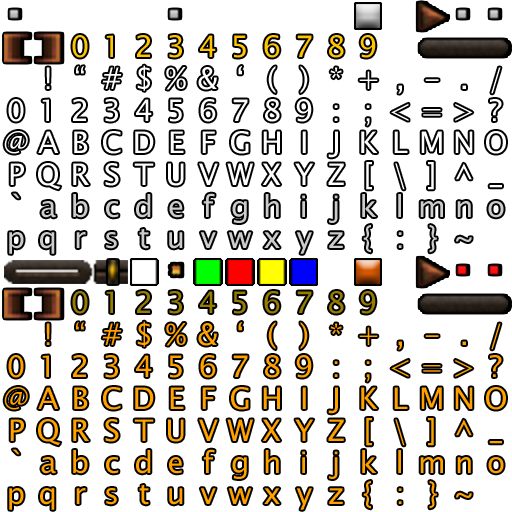
<style>
.page{position:relative;width:512px;height:512px;background:#ffffff}
.page>*{position:absolute;margin:0}
.t1{font:29.6px "LucidaSansUnicode";letter-spacing:0.35em;color:#ffc600}
.t2{font:29.6px "LucidaSansUnicode";letter-spacing:0.35em;color:#ffffff}
.t3{font:29.6px "LucidaSansUnicode";letter-spacing:0.35em;color:#cccccc}
.t4{font:29.6px "LucidaSansUnicode";letter-spacing:0.35em;color:#967c00}
.t5{font:29.6px "LucidaSansUnicode";letter-spacing:0.35em;color:#ffa200}
</style>
<div class="page">
<p class="t1" style="left:72px;top:35px;width:16px;height:23px">0</p>
<p class="t1" style="left:106px;top:35px;width:7px;height:22px">1</p>
<p class="t1" style="left:137px;top:35px;width:13px;height:22px">2</p>
<p class="t1" style="left:169px;top:35px;width:13px;height:23px">3</p>
<p class="t1" style="left:200px;top:35px;width:16px;height:22px">4</p>
<p class="t1" style="left:234px;top:35px;width:12px;height:23px">5</p>
<p class="t1" style="left:264px;top:35px;width:16px;height:23px">6</p>
<p class="t1" style="left:297px;top:35px;width:15px;height:22px">7</p>
<p class="t1" style="left:329px;top:35px;width:15px;height:23px">8</p>
<p class="t1" style="left:360px;top:35px;width:16px;height:23px">9</p>
<p class="t2" style="left:137px;top:65px;width:13px;height:26px">$</p>
<p class="t2" style="left:46px;top:67px;width:4px;height:22px">!</p>
<p class="t2" style="left:76px;top:66px;width:8px;height:8px">“</p>
<p class="t2" style="left:102px;top:67px;width:20px;height:22px">#</p>
<p class="t2" style="left:166px;top:67px;width:20px;height:23px">%</p>
<p class="t2" style="left:198px;top:67px;width:19px;height:23px">&amp;</p>
<p class="t2" style="left:238px;top:66px;width:4px;height:9px">‘</p>
<p class="t2" style="left:268px;top:66px;width:8px;height:28px">(</p>
<p class="t2" style="left:300px;top:66px;width:8px;height:28px">)</p>
<p class="t2" style="left:330px;top:67px;width:12px;height:12px">*</p>
<p class="t2" style="left:398px;top:85px;width:4px;height:9px">,</p>
<p class="t2" style="left:425px;top:79px;width:14px;height:2px">-</p>
<p class="t2" style="left:462px;top:85px;width:4px;height:4px">.</p>
<p class="t2" style="left:8px;top:99px;width:16px;height:23px">0</p>
<p class="t2" style="left:42px;top:99px;width:7px;height:22px">1</p>
<p class="t2" style="left:73px;top:99px;width:13px;height:22px">2</p>
<p class="t2" style="left:105px;top:99px;width:13px;height:23px">3</p>
<p class="t2" style="left:136px;top:99px;width:16px;height:22px">4</p>
<p class="t2" style="left:170px;top:99px;width:12px;height:23px">5</p>
<p class="t2" style="left:200px;top:99px;width:16px;height:23px">6</p>
<p class="t2" style="left:265px;top:99px;width:15px;height:23px">8</p>
<p class="t2" style="left:296px;top:99px;width:16px;height:23px">9</p>
<p class="t2" style="left:490px;top:99px;width:12px;height:22px">?</p>
<p class="t2" style="left:423px;top:109px;width:18px;height:7px">=</p>
<p class="t2" style="left:4px;top:131px;width:24px;height:23px">@</p>
<p class="t2" style="left:38px;top:131px;width:21px;height:22px">A</p>
<p class="t2" style="left:74px;top:131px;width:14px;height:22px">B</p>
<p class="t2" style="left:135px;top:131px;width:19px;height:22px">D</p>
<p class="t2" style="left:170px;top:131px;width:14px;height:22px">E</p>
<p class="t2" style="left:202px;top:131px;width:13px;height:22px">F</p>
<p class="t2" style="left:231px;top:131px;width:18px;height:23px">G</p>
<p class="t2" style="left:263px;top:131px;width:17px;height:22px">H</p>
<p class="t2" style="left:302px;top:131px;width:4px;height:22px">I</p>
<p class="t2" style="left:328px;top:131px;width:10px;height:27px">J</p>
<p class="t2" style="left:361px;top:131px;width:17px;height:22px">K</p>
<p class="t2" style="left:421px;top:131px;width:21px;height:22px">M</p>
<p class="t2" style="left:455px;top:131px;width:18px;height:22px">N</p>
<p class="t2" style="left:486px;top:131px;width:20px;height:23px">O</p>
<p class="t2" style="left:10px;top:163px;width:14px;height:22px">P</p>
<p class="t2" style="left:38px;top:163px;width:23px;height:27px">Q</p>
<p class="t2" style="left:73px;top:163px;width:16px;height:22px">R</p>
<p class="t2" style="left:105px;top:163px;width:14px;height:23px">S</p>
<p class="t2" style="left:168px;top:163px;width:16px;height:23px">U</p>
<p class="t2" style="left:199px;top:163px;width:19px;height:22px">V</p>
<p class="t2" style="left:227px;top:163px;width:26px;height:22px">W</p>
<p class="t2" style="left:262px;top:163px;width:19px;height:22px">X</p>
<p class="t2" style="left:328px;top:163px;width:16px;height:22px">Z</p>
<p class="t2" style="left:366px;top:162px;width:6px;height:28px">[</p>
<p class="t2" style="left:428px;top:162px;width:6px;height:28px">]</p>
<p class="t2" style="left:456px;top:163px;width:16px;height:17px">^</p>
<p class="t2" style="left:489px;top:185px;width:13px;height:3px">_</p>
<p class="t3" style="left:12px;top:193px;width:8px;height:6px">`</p>
<p class="t3" style="left:73px;top:194px;width:15px;height:24px">b</p>
<p class="t3" style="left:136px;top:194px;width:15px;height:24px">d</p>
<p class="t3" style="left:302px;top:195px;width:3px;height:22px">i</p>
<p class="t3" style="left:398px;top:194px;width:3px;height:23px">l</p>
<p class="t3" style="left:41px;top:201px;width:15px;height:17px">a</p>
<p class="t3" style="left:169px;top:201px;width:14px;height:17px">e</p>
<p class="t3" style="left:232px;top:201px;width:15px;height:22px">g</p>
<p class="t3" style="left:420px;top:201px;width:23px;height:16px">m</p>
<p class="t3" style="left:457px;top:201px;width:14px;height:16px">n</p>
<p class="t3" style="left:488px;top:201px;width:16px;height:17px">o</p>
<p class="t3" style="left:9px;top:232px;width:15px;height:22px">p</p>
<p class="t3" style="left:40px;top:232px;width:15px;height:22px">q</p>
<p class="t3" style="left:106px;top:232px;width:11px;height:17px">s</p>
<p class="t3" style="left:139px;top:229px;width:10px;height:20px">t</p>
<p class="t3" style="left:169px;top:232px;width:14px;height:17px">u</p>
<p class="t3" style="left:228px;top:232px;width:24px;height:16px">w</p>
<p class="t3" style="left:264px;top:232px;width:16px;height:16px">x</p>
<p class="t3" style="left:329px;top:232px;width:14px;height:16px">z</p>
<p class="t3" style="left:363px;top:225px;width:8px;height:28px">{</p>
<p class="t3" style="left:429px;top:225px;width:8px;height:28px">}</p>
<p class="t3" style="left:456px;top:236px;width:16px;height:6px">~</p>
<p class="t4" style="left:72px;top:291px;width:16px;height:23px">0</p>
<p class="t4" style="left:106px;top:291px;width:7px;height:22px">1</p>
<p class="t4" style="left:137px;top:291px;width:13px;height:22px">2</p>
<p class="t4" style="left:169px;top:291px;width:13px;height:23px">3</p>
<p class="t4" style="left:200px;top:291px;width:16px;height:22px">4</p>
<p class="t4" style="left:234px;top:291px;width:12px;height:23px">5</p>
<p class="t4" style="left:264px;top:291px;width:16px;height:23px">6</p>
<p class="t4" style="left:297px;top:291px;width:15px;height:22px">7</p>
<p class="t4" style="left:329px;top:291px;width:15px;height:23px">8</p>
<p class="t4" style="left:360px;top:291px;width:16px;height:23px">9</p>
<p class="t5" style="left:46px;top:323px;width:4px;height:22px">!</p>
<p class="t5" style="left:76px;top:322px;width:8px;height:8px">“</p>
<p class="t5" style="left:102px;top:323px;width:20px;height:22px">#</p>
<p class="t5" style="left:137px;top:321px;width:13px;height:26px">$</p>
<p class="t5" style="left:166px;top:323px;width:20px;height:23px">%</p>
<p class="t5" style="left:198px;top:323px;width:19px;height:23px">&amp;</p>
<p class="t5" style="left:238px;top:322px;width:4px;height:9px">‘</p>
<p class="t5" style="left:268px;top:322px;width:8px;height:28px">(</p>
<p class="t5" style="left:300px;top:322px;width:8px;height:28px">)</p>
<p class="t5" style="left:330px;top:323px;width:12px;height:12px">*</p>
<p class="t5" style="left:359px;top:327px;width:19px;height:18px">+</p>
<p class="t5" style="left:491px;top:323px;width:10px;height:27px">/</p>
<p class="t5" style="left:398px;top:341px;width:4px;height:9px">,</p>
<p class="t5" style="left:425px;top:335px;width:14px;height:2px">-</p>
<p class="t5" style="left:462px;top:341px;width:4px;height:4px">.</p>
<p class="t5" style="left:8px;top:355px;width:16px;height:23px">0</p>
<p class="t5" style="left:42px;top:355px;width:7px;height:22px">1</p>
<p class="t5" style="left:73px;top:355px;width:13px;height:22px">2</p>
<p class="t5" style="left:105px;top:355px;width:13px;height:23px">3</p>
<p class="t5" style="left:136px;top:355px;width:16px;height:22px">4</p>
<p class="t5" style="left:170px;top:355px;width:12px;height:23px">5</p>
<p class="t5" style="left:200px;top:355px;width:16px;height:23px">6</p>
<p class="t5" style="left:233px;top:355px;width:15px;height:22px">7</p>
<p class="t5" style="left:265px;top:355px;width:15px;height:23px">8</p>
<p class="t5" style="left:296px;top:355px;width:16px;height:23px">9</p>
<p class="t5" style="left:334px;top:361px;width:4px;height:16px">:</p>
<p class="t5" style="left:366px;top:361px;width:4px;height:21px">;</p>
<p class="t5" style="left:391px;top:359px;width:18px;height:18px">&lt;</p>
<p class="t5" style="left:423px;top:365px;width:18px;height:7px">=</p>
<p class="t5" style="left:455px;top:359px;width:18px;height:18px">&gt;</p>
<p class="t5" style="left:490px;top:355px;width:12px;height:22px">?</p>
<p class="t5" style="left:4px;top:387px;width:24px;height:23px">@</p>
<p class="t5" style="left:38px;top:387px;width:21px;height:22px">A</p>
<p class="t5" style="left:74px;top:387px;width:14px;height:22px">B</p>
<p class="t5" style="left:103px;top:387px;width:18px;height:23px">C</p>
<p class="t5" style="left:135px;top:387px;width:19px;height:22px">D</p>
<p class="t5" style="left:170px;top:387px;width:14px;height:22px">E</p>
<p class="t5" style="left:202px;top:387px;width:13px;height:22px">F</p>
<p class="t5" style="left:231px;top:387px;width:18px;height:23px">G</p>
<p class="t5" style="left:263px;top:387px;width:17px;height:22px">H</p>
<p class="t5" style="left:302px;top:387px;width:4px;height:22px">I</p>
<p class="t5" style="left:328px;top:387px;width:10px;height:27px">J</p>
<p class="t5" style="left:361px;top:387px;width:17px;height:22px">K</p>
<p class="t5" style="left:394px;top:387px;width:14px;height:22px">L</p>
<p class="t5" style="left:421px;top:387px;width:21px;height:22px">M</p>
<p class="t5" style="left:455px;top:387px;width:18px;height:22px">N</p>
<p class="t5" style="left:486px;top:387px;width:20px;height:23px">O</p>
<p class="t5" style="left:10px;top:419px;width:14px;height:22px">P</p>
<p class="t5" style="left:38px;top:419px;width:23px;height:27px">Q</p>
<p class="t5" style="left:73px;top:419px;width:16px;height:22px">R</p>
<p class="t5" style="left:105px;top:419px;width:14px;height:23px">S</p>
<p class="t5" style="left:134px;top:419px;width:20px;height:22px">T</p>
<p class="t5" style="left:168px;top:419px;width:16px;height:23px">U</p>
<p class="t5" style="left:199px;top:419px;width:19px;height:22px">V</p>
<p class="t5" style="left:227px;top:419px;width:26px;height:22px">W</p>
<p class="t5" style="left:262px;top:419px;width:19px;height:22px">X</p>
<p class="t5" style="left:295px;top:419px;width:19px;height:22px">Y</p>
<p class="t5" style="left:328px;top:419px;width:16px;height:22px">Z</p>
<p class="t5" style="left:366px;top:418px;width:6px;height:28px">[</p>
<p class="t5" style="left:395px;top:419px;width:10px;height:27px">\</p>
<p class="t5" style="left:428px;top:418px;width:6px;height:28px">]</p>
<p class="t5" style="left:456px;top:419px;width:16px;height:17px">^</p>
<p class="t5" style="left:12px;top:449px;width:8px;height:6px">`</p>
<p class="t5" style="left:203px;top:449px;width:12px;height:24px">f</p>
<p class="t5" style="left:489px;top:441px;width:13px;height:3px">_</p>
<p class="t5" style="left:41px;top:457px;width:15px;height:17px">a</p>
<p class="t5" style="left:73px;top:450px;width:15px;height:24px">b</p>
<p class="t5" style="left:106px;top:457px;width:13px;height:17px">c</p>
<p class="t5" style="left:136px;top:450px;width:15px;height:24px">d</p>
<p class="t5" style="left:169px;top:457px;width:13px;height:17px">e</p>
<p class="t5" style="left:232px;top:457px;width:15px;height:22px">g</p>
<p class="t5" style="left:265px;top:450px;width:14px;height:23px">h</p>
<p class="t5" style="left:302px;top:451px;width:3px;height:22px">i</p>
<p class="t5" style="left:329px;top:451px;width:9px;height:28px">j</p>
<p class="t5" style="left:362px;top:450px;width:15px;height:23px">k</p>
<p class="t5" style="left:398px;top:450px;width:3px;height:23px">l</p>
<p class="t5" style="left:420px;top:457px;width:23px;height:16px">m</p>
<p class="t5" style="left:457px;top:457px;width:14px;height:16px">n</p>
<p class="t5" style="left:488px;top:457px;width:16px;height:17px">o</p>
<p class="t5" style="left:139px;top:485px;width:10px;height:20px">t</p>
<p class="t5" style="left:363px;top:481px;width:8px;height:28px">{</p>
<p class="t5" style="left:429px;top:481px;width:8px;height:28px">}</p>
<p class="t5" style="left:9px;top:488px;width:15px;height:22px">p</p>
<p class="t5" style="left:40px;top:488px;width:15px;height:22px">q</p>
<p class="t5" style="left:76px;top:488px;width:10px;height:16px">r</p>
<p class="t5" style="left:106px;top:488px;width:11px;height:17px">s</p>
<p class="t5" style="left:169px;top:488px;width:14px;height:17px">u</p>
<p class="t5" style="left:200px;top:488px;width:16px;height:16px">v</p>
<p class="t5" style="left:228px;top:488px;width:24px;height:16px">w</p>
<p class="t5" style="left:264px;top:488px;width:16px;height:16px">x</p>
<p class="t5" style="left:296px;top:488px;width:16px;height:22px">y</p>
<p class="t5" style="left:329px;top:488px;width:14px;height:16px">z</p>
<p class="t5" style="left:398px;top:488px;width:4px;height:16px">:</p>
<p class="t5" style="left:456px;top:492px;width:16px;height:6px">~</p>
</div>
